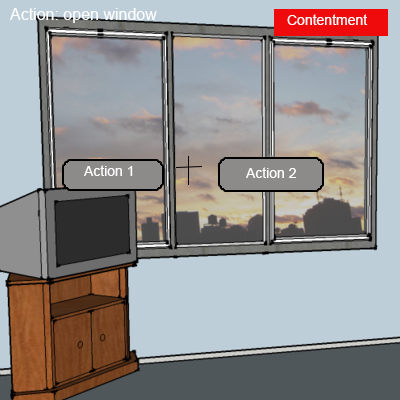
<style>
.page{position:relative;width:400px;height:400px;background:#beced8}
.page>*{position:absolute;margin:0}
.t1{font:16px "ArialMT";color:#ffffff}
.t2{font:14px "ArialMT";color:#fcf8f8}
.t3{font:14px "ArialMT";color:#ffffff}
</style>
<div class="page">
<p class="t1" style="left:10px;top:8px;width:147px;height:15px">Action: open window</p>
<p class="t2" style="left:287px;top:14px;width:81px;height:11px">Contentment</p>
<p class="t3" style="left:84px;top:165px;width:49px;height:11px">Action 1</p>
<p class="t3" style="left:246px;top:167px;width:50px;height:11px">Action 2</p>
</div>
